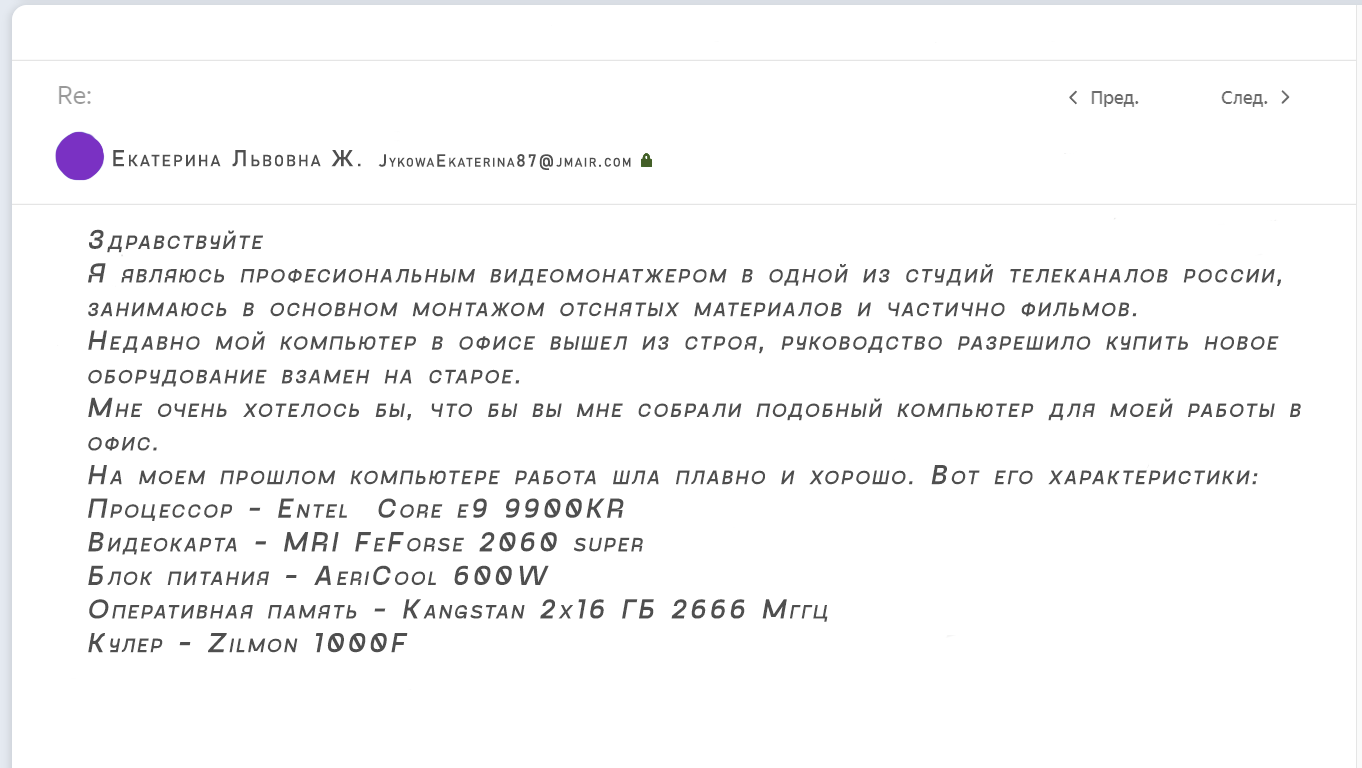
<style>
.page{position:relative;width:1362px;height:768px;background:#ffffff}
.page>*{position:absolute;margin:0}
.t1{font:22.7px "Bahnschrift";letter-spacing:0.12em;color:#4f4f4f;font-variant:small-caps;font-style:italic}
.t2{font:17.3px "Bahnschrift";letter-spacing:0.12em;color:#4f4f4f;font-variant:small-caps;font-style:italic}
.t3{font:28px "GoshaSans-Regular";letter-spacing:0.12em;color:#4f4f4f;font-variant:small-caps;font-style:italic}
</style>
<div class="page">
<p class="t1" style="left:113px;top:150px;width:248px;height:17px">Екатерина Львовна Ж.</p>
<p class="t2" style="left:378px;top:154px;width:253px;height:16px">JykowaEkaterina87@jmair.com</p>
<p class="t3" style="left:88px;top:229px;width:1213px;height:424px">Здравствуйте<br>Я являюсь професиональным видеомонатжером в одной из студий телеканалов россии, <br>занимаюсь в основном монтажом отснятых материалов и частично фильмов.<br>Недавно мой компьютер в офисе вышел из строя, руководство разрешило купить новое <br>оборудование взамен на старое.<br>Мне очень хотелось бы, что бы вы мне собрали подобный компьютер для моей работы в <br>офис.<br>На моем прошлом компьютере работа шла плавно и хорошо. Вот его характеристики:<br>Процессор - Entel  Core e9 9900KR<br>Видеокарта - MRI FeForse 2060 super<br>Блок питания - AeriCool 600W<br>Оперативная память - Kangstan 2x16 ГБ 2666 Мггц<br>Кулер - Zilmon 1000F</p>
</div>
